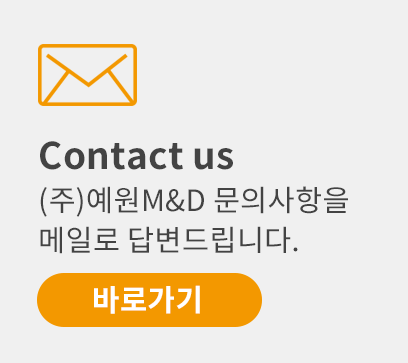
<style>
.page{position:relative;width:408px;height:363px;background:#f0f0f0}
.page>*{position:absolute;margin:0}
.t1{font:29.4px/42px "NotoSansCJKkr-Regular";letter-spacing:0.01em;color:#434343}
.t2{font:36.7px/37.2px "NotoSansCJKkr-Bold";letter-spacing:0.01em;color:#434343}
.t3{font:29.4px/39.9px "NotoSansCJKkr-Regular";letter-spacing:0.01em;color:#434343}
.t4{font:30px "NotoSansCJKkr-Bold";letter-spacing:0.01em;color:#ffffff}
</style>
<div class="page">
<p class="t1" style="left:40px;top:141px;width:308px;height:113px"><span class="t2">Contact us<br></span>(주)예원M&amp;D 문의사항을 <br><span class="t3">메일로 답변드립니다.</span></p>
<p class="t4" style="left:94px;top:285px;width:106px;height:29px">바로가기</p>
</div>
